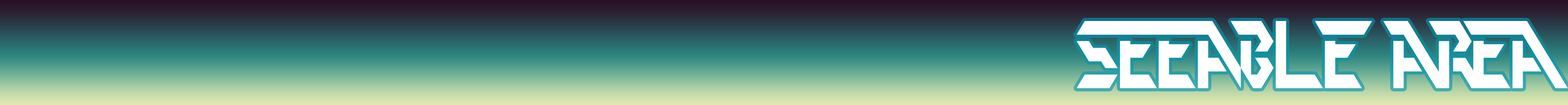
<style>
.page{position:relative;width:1568px;height:105px}
.page>*{position:absolute;margin:0}
.t1{font:95.5px "PerfectDarkBRK)";color:#ffffff;scale:0.61 1}
</style>
<div class="page">
<p class="t1" style="left:1076px;top:21px;width:492px;height:67px">seeable area</p>
</div>
